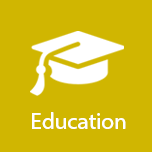
<style>
.page{position:relative;width:152px;height:152px;background:#d0b601}
.page>*{position:absolute;margin:0}
.t1{font:23px "MyriadHebrew-Regular";color:#ffffff}
</style>
<div class="page">
<p class="t1" style="left:32px;top:112px;width:94px;height:17px">Education</p>
</div>
